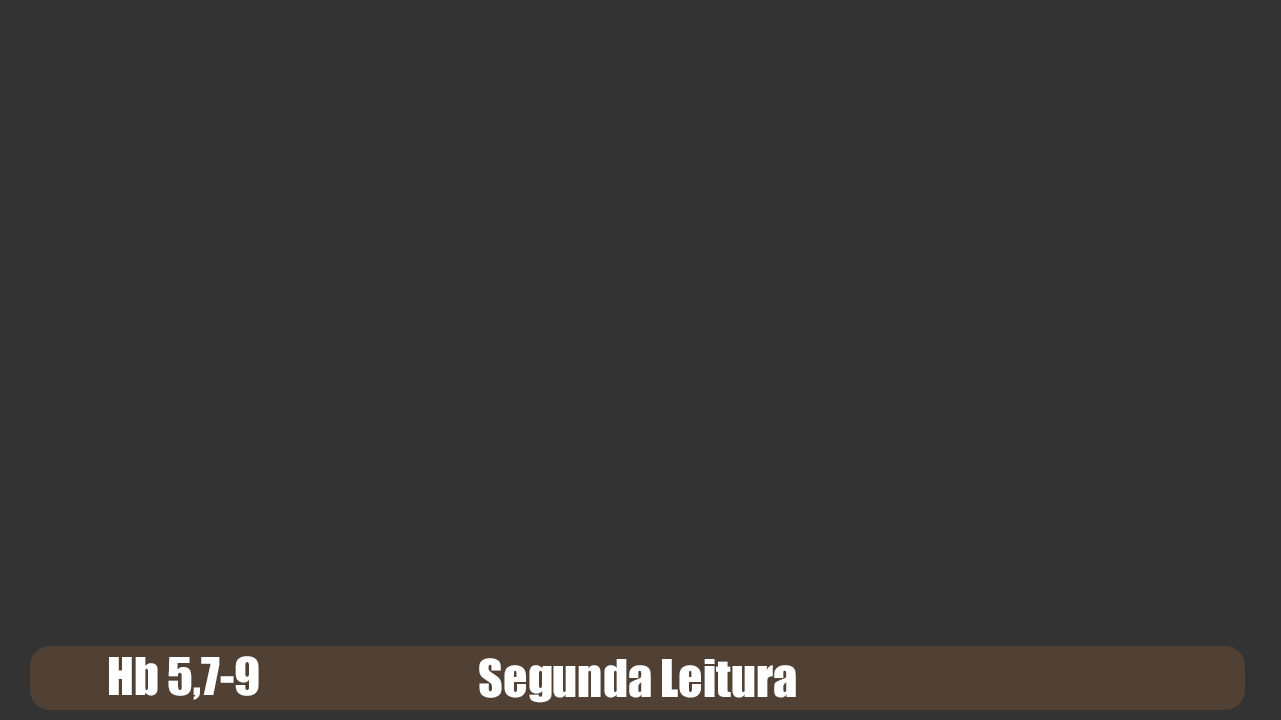
<style>
.page{position:relative;width:1281px;height:720px;background:#333333}
.page>*{position:absolute;margin:0}
.t1{font:48px "Impact";color:#ffffff}
</style>
<div class="page">
<p class="t1" style="left:109px;top:656px;width:150px;height:44px">Hb 5,7-9</p>
<p class="t1" style="left:479px;top:658px;width:317px;height:45px">Segunda Leitura</p>
</div>
